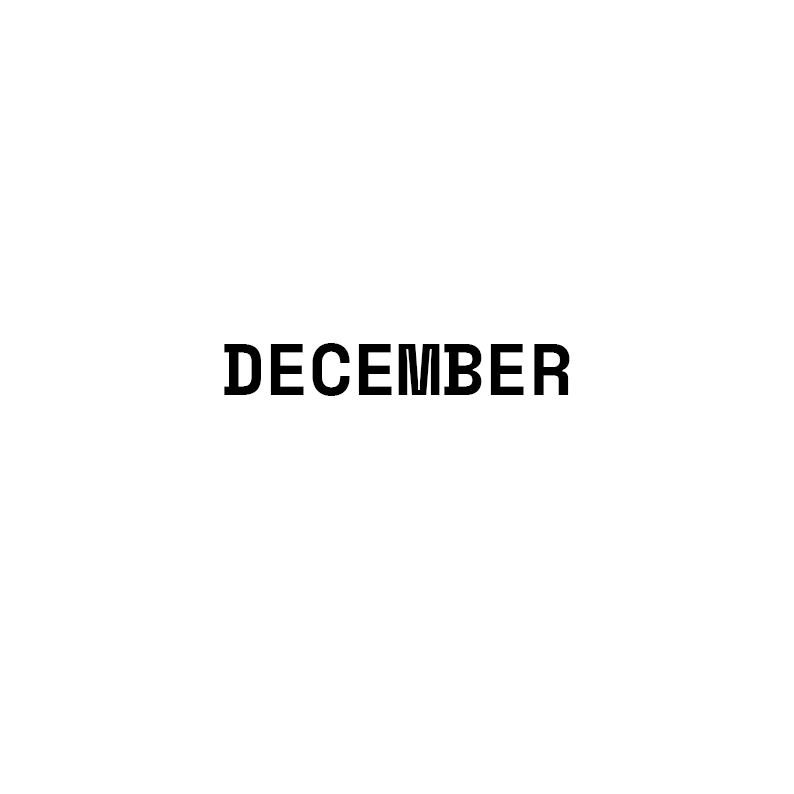
<style>
.page{position:relative;width:794px;height:794px;background:#ffffff}
.page>*{position:absolute;margin:0}
.t1{font:72px "SpaceMono-Bold";color:#000000}
</style>
<div class="page">
<p class="t1" style="left:224px;top:343px;width:346px;height:53px">DECEMBER</p>
</div>
